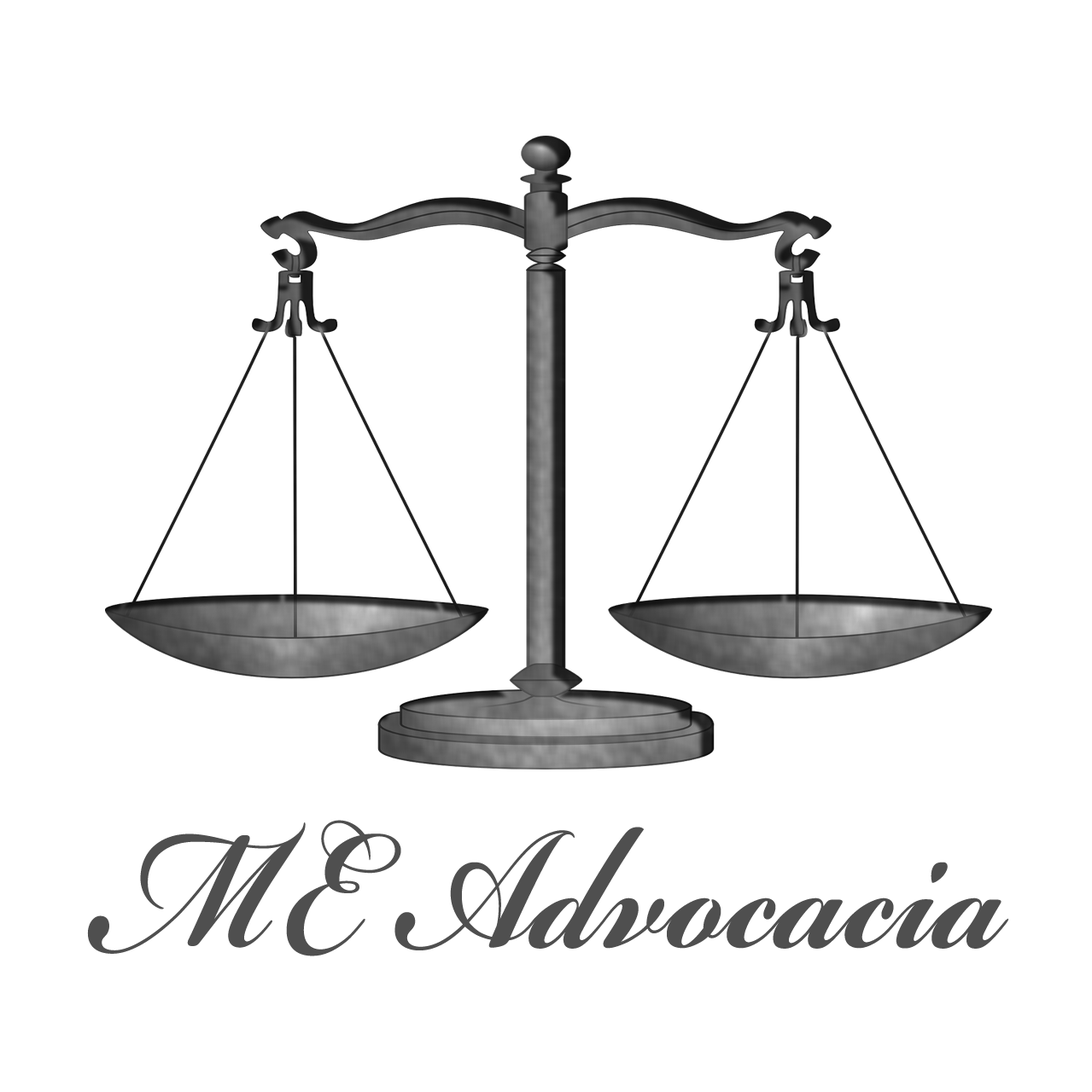
<style>
.page{position:relative;width:1092px;height:1092px;background:#ffffff}
.page>*{position:absolute;margin:0}
.t1{font:268.6px "BickhamScriptPro-Bold";color:#4f4f4f;scale:0.72 1}
</style>
<div class="page">
<p class="t1" style="left:87px;top:820px;width:922px;height:137px">ME Advocacia</p>
</div>
